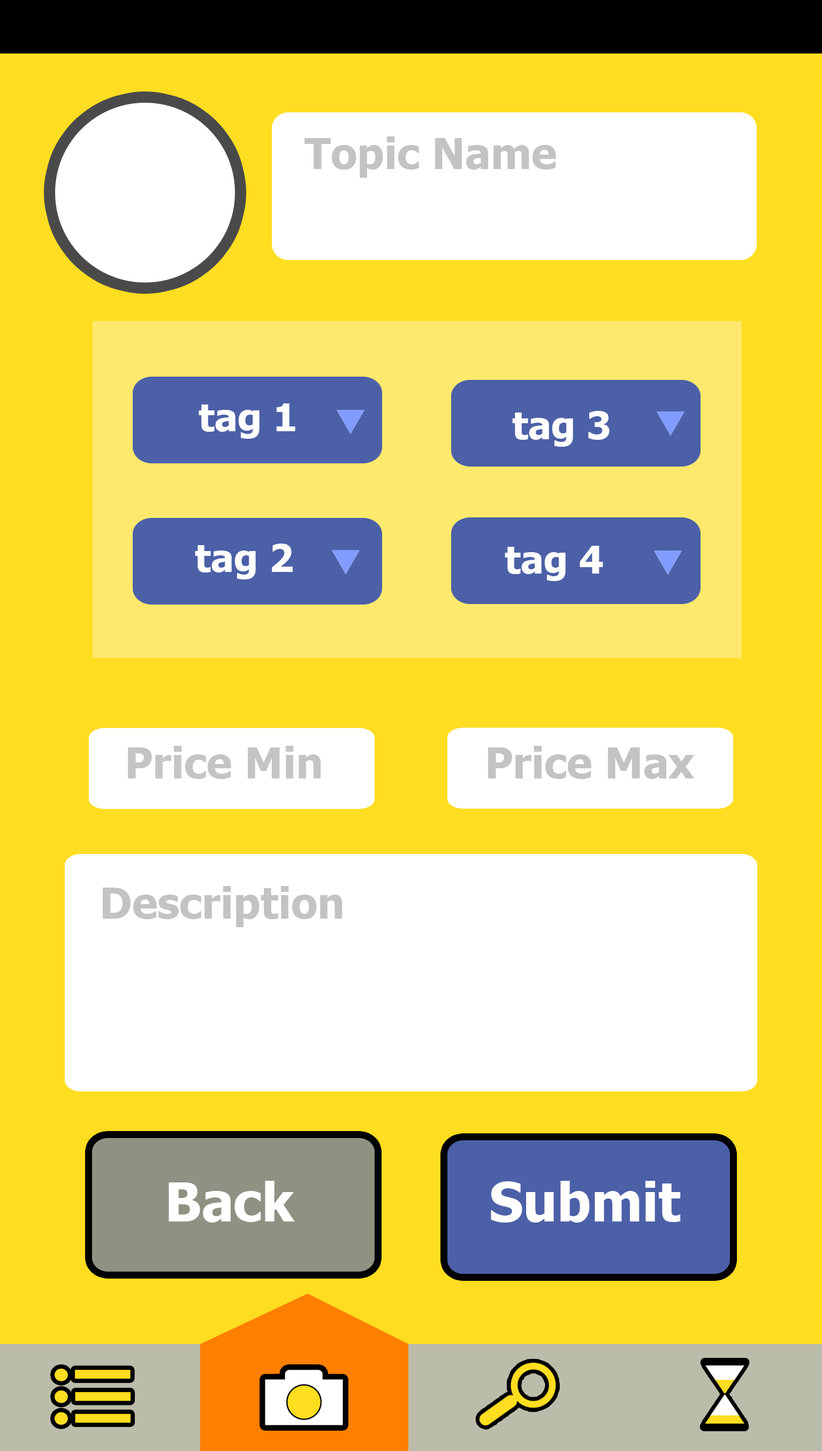
<style>
.page{position:relative;width:822px;height:1451px;background:#ffdd20}
.page>*{position:absolute;margin:0}
.t1{font:42.8px "Tahoma-Bold";color:#c3c3c3}
.t2{font:38.5px "Tahoma-Bold";color:#fefefe}
.t3{font:42.8px "Tahoma-Bold";color:#c4c4c4}
.t4{font:53.5px "Tahoma-Bold";color:#ffffff}
</style>
<div class="page">
<p class="t1" style="left:304px;top:136px;width:252px;height:42px">Topic Name</p>
<p class="t2" style="left:198px;top:403px;width:97px;height:36px">tag 1</p>
<p class="t2" style="left:512px;top:411px;width:97px;height:36px">tag 3</p>
<p class="t2" style="left:195px;top:544px;width:98px;height:35px">tag 2</p>
<p class="t2" style="left:505px;top:546px;width:98px;height:35px">tag 4</p>
<p class="t3" style="left:128px;top:746px;width:193px;height:33px">Price Min</p>
<p class="t1" style="left:488px;top:746px;width:206px;height:33px">Price Max</p>
<p class="t1" style="left:103px;top:886px;width:239px;height:41px">Description</p>
<p class="t4" style="left:169px;top:1181px;width:126px;height:42px">Back</p>
<p class="t4" style="left:491px;top:1181px;width:190px;height:42px">Submit</p>
</div>
